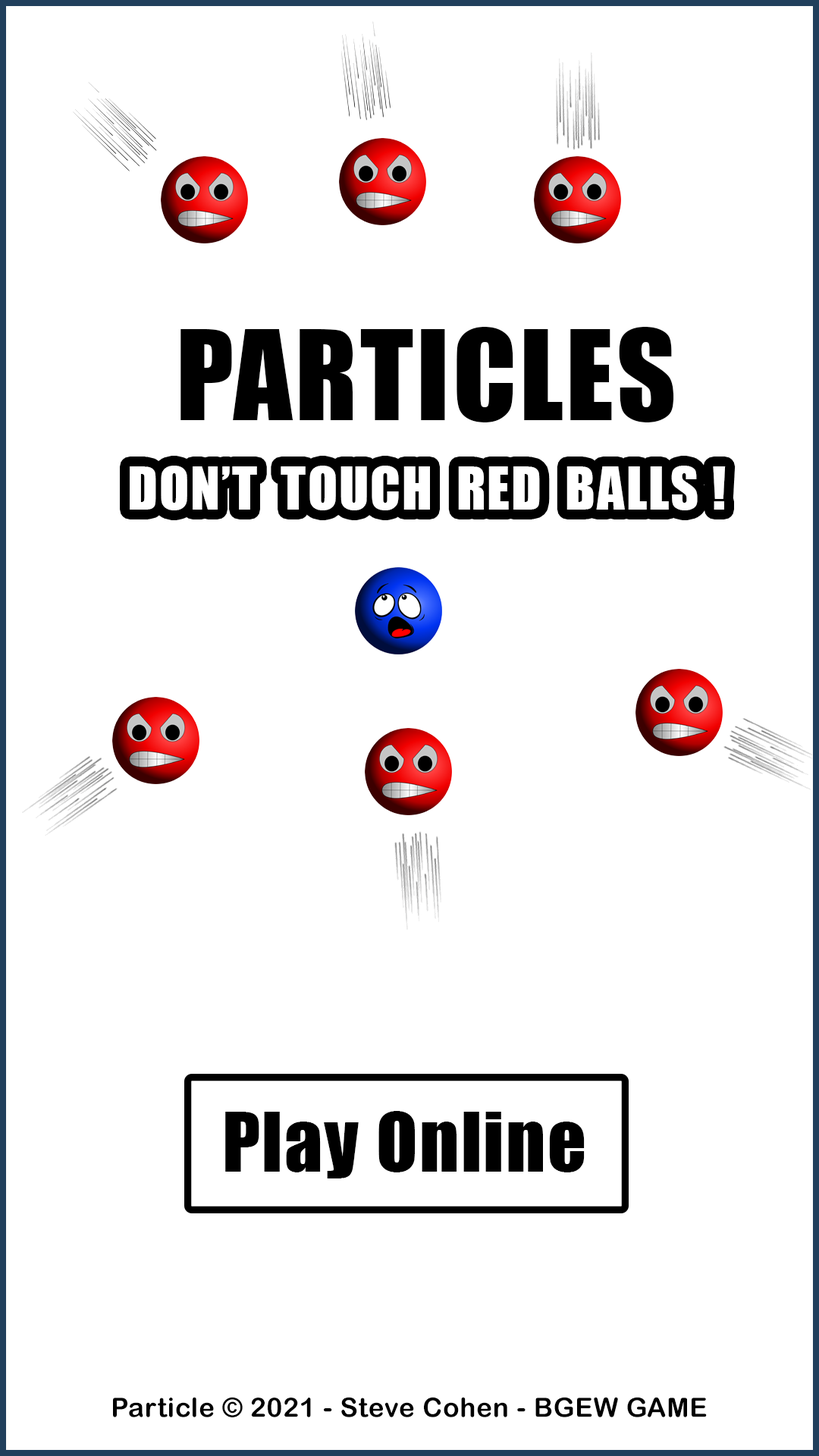
<style>
.page{position:relative;width:819px;height:1456px;background:#ffffff}
.page>*{position:absolute;margin:0}
.t1{font:115.3px "Impact";letter-spacing:0.025em;color:#000000;text-transform:uppercase}
.t2{font:54.9px "Impact";letter-spacing:0.025em;color:#ffffff;text-transform:uppercase}
.t3{font:75.8px "Impact";letter-spacing:0.025em;color:#000000}
.t4{font:26.5px "ArialRoundedMTBold";letter-spacing:0.025em;color:#000000}
</style>
<div class="page">
<p class="t1" style="left:180px;top:327px;width:494px;height:95px">PARTICLES</p>
<p class="t2" style="left:130px;top:466px;width:596px;height:44px">DON’t  TOUCH  RED  BALLS !</p>
<p class="t3" style="left:225px;top:1111px;width:360px;height:67px">Play Online</p>
<p class="t4" style="left:113px;top:1397px;width:594px;height:20px">Particle © 2021 - Steve Cohen - BGEW GAME</p>
</div>
